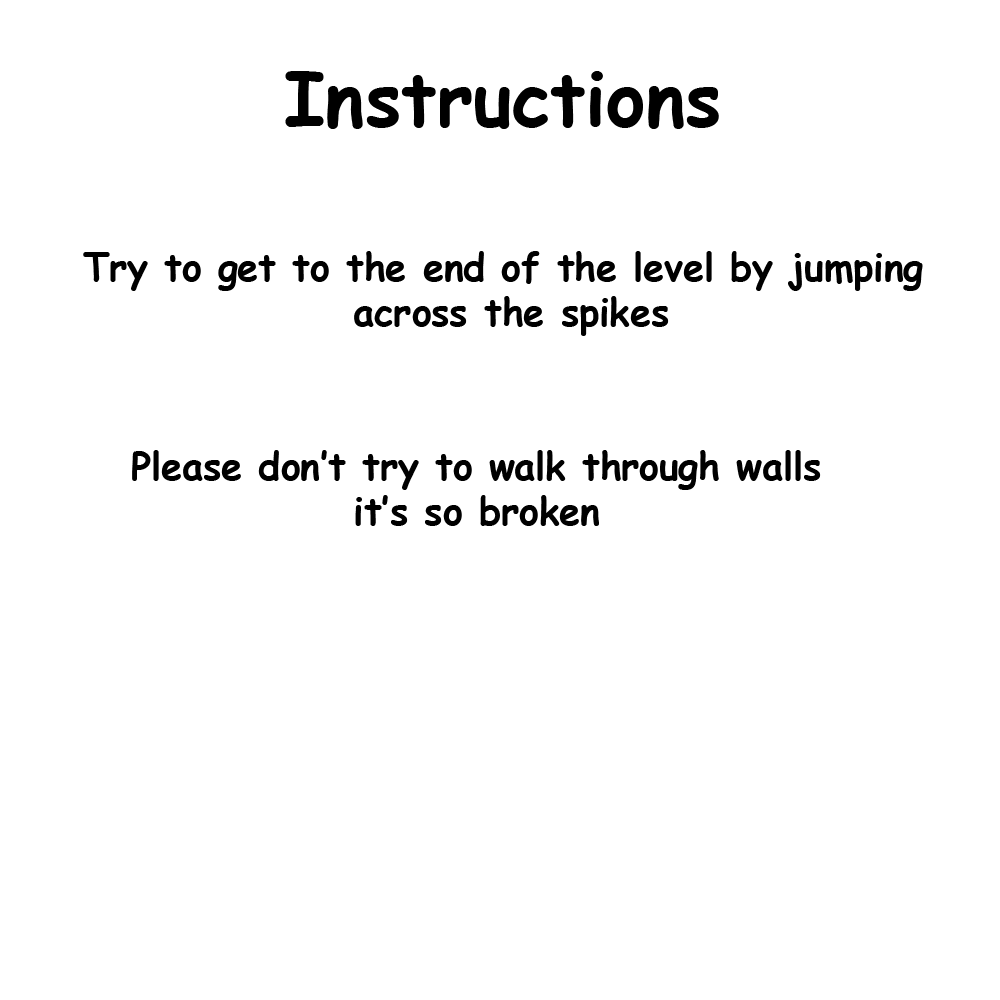
<style>
.page{position:relative;width:1000px;height:1000px;background:#ffffff}
.page>*{position:absolute;margin:0}
.t1{font:75px "ComicSansMS-Bold";color:#000000}
.t2{font:37.5px "ComicSansMS-Bold";color:#000000}
</style>
<div class="page">
<p class="t1" style="left:285px;top:71px;width:434px;height:58px">Instructions</p>
<p class="t2" style="left:83px;top:251px;width:840px;height:85px;text-align:center">Try to get to the end of the level by jumping <br>across the spikes</p>
<p class="t2" style="left:132px;top:450px;width:689px;height:76px;text-align:center">Please don’t try to walk through walls<br>it’s so broken</p>
</div>
